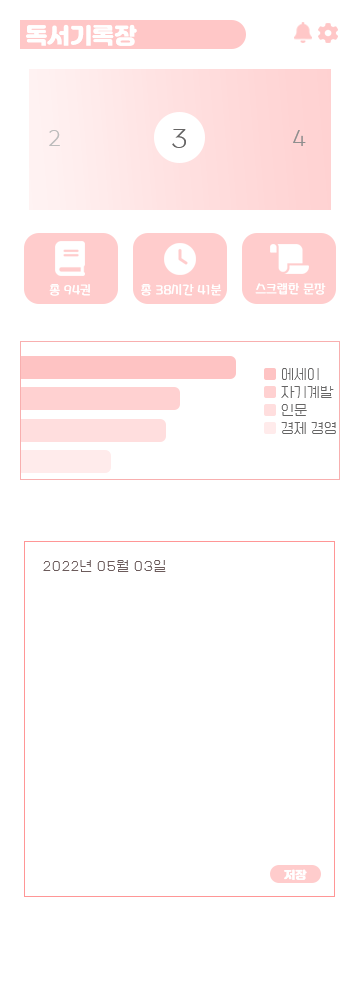
<style>
.page{position:relative;width:360px;height:1000px;background:#ffffff}
.page>*{position:absolute;margin:0}
.t1{font:22.2px "JalnanOTF";color:#ffffff}
.t2{font:24px "Cafe24Simplehae";color:#bcbcbc}
.t3{font:30px "Cafe24Simplehae";color:#666565}
.t4{font:24px "Cafe24Simplehae";color:#8f8f8f}
.t5{font:14px "HUYunnamsalon140";color:#ffffff}
.t6{font:14px/18px "Cafe24Ssurroundair";color:#666565}
.t7{font:14px "Cafe24Ssurroundair";color:#6c5b5b}
.t8{font:11px "JalnanOTF";color:#ffffff}
</style>
<div class="page">
<p class="t1" style="left:26px;top:24px;width:111px;height:22px">독서기록장</p>
<p class="t2" style="left:49px;top:130px;width:11px;height:16px">2</p>
<p class="t3" style="left:172px;top:129px;width:14px;height:19px">3</p>
<p class="t4" style="left:293px;top:130px;width:13px;height:16px">4</p>
<p class="t5" style="left:49px;top:284px;width:41px;height:12px">총 94권</p>
<p class="t5" style="left:141px;top:284px;width:81px;height:12px">총 38시간 41분</p>
<p class="t5" style="left:255px;top:283px;width:71px;height:12px">스크랩한 문장</p>
<p class="t6" style="left:281px;top:368px;width:55px;height:66px">에세이<br>자기계발<br>인문<br>경제 경영</p>
<p class="t7" style="left:43px;top:560px;width:123px;height:12px">2022년 05월 03일</p>
<p class="t8" style="left:284px;top:869px;width:23px;height:11px">저장</p>
</div>
